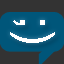
<style>
.page{position:relative;width:64px;height:64px;background:#333333}
.page>*{position:absolute;margin:0}
.t1{font:48px "ArialMT";color:#ffffff}
</style>
<div class="page">
<p class="t1" style="left:10px;top:20px;width:45px;height:23px;rotate:90deg">;)</p>
</div>
